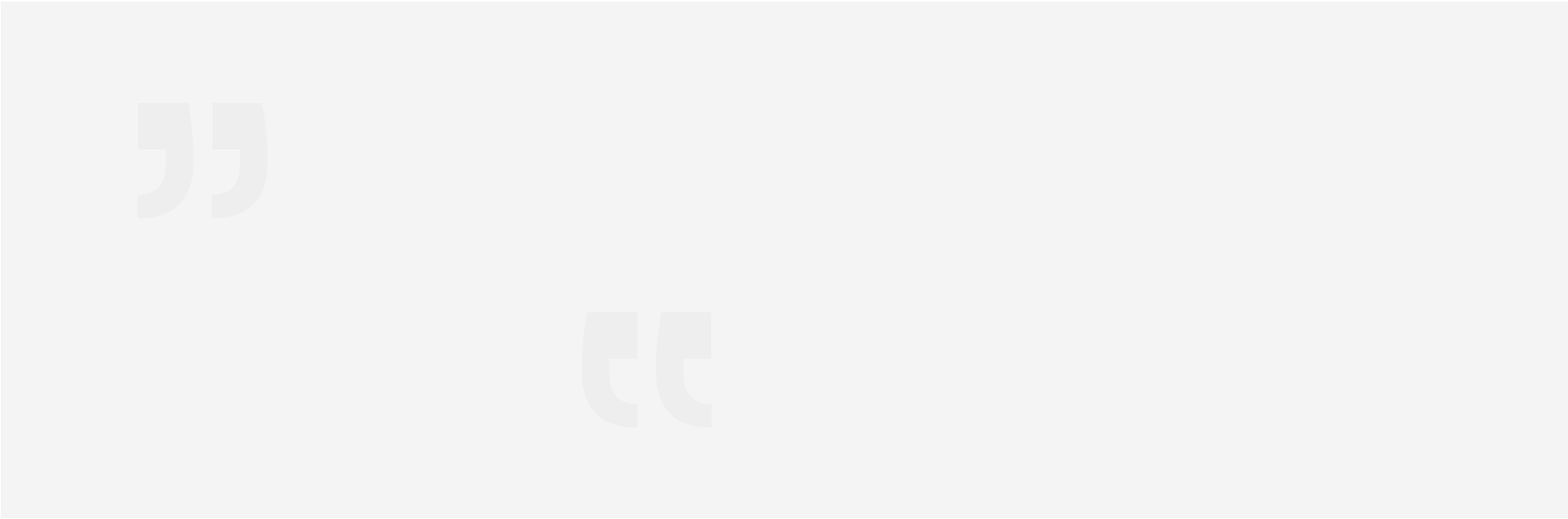
<style>
.page{position:relative;width:1568px;height:519px;background:#f4f4f4}
.page>*{position:absolute;margin:0}
.t1{font:612.8px "Poppins-Light";letter-spacing:-0.02em;color:#eeeded}
</style>
<div class="page">
<p class="t1" style="left:137px;top:103px;width:131px;height:115px;rotate:180deg">“</p>
<p class="t1" style="left:582px;top:312px;width:131px;height:115px">“</p>
</div>
